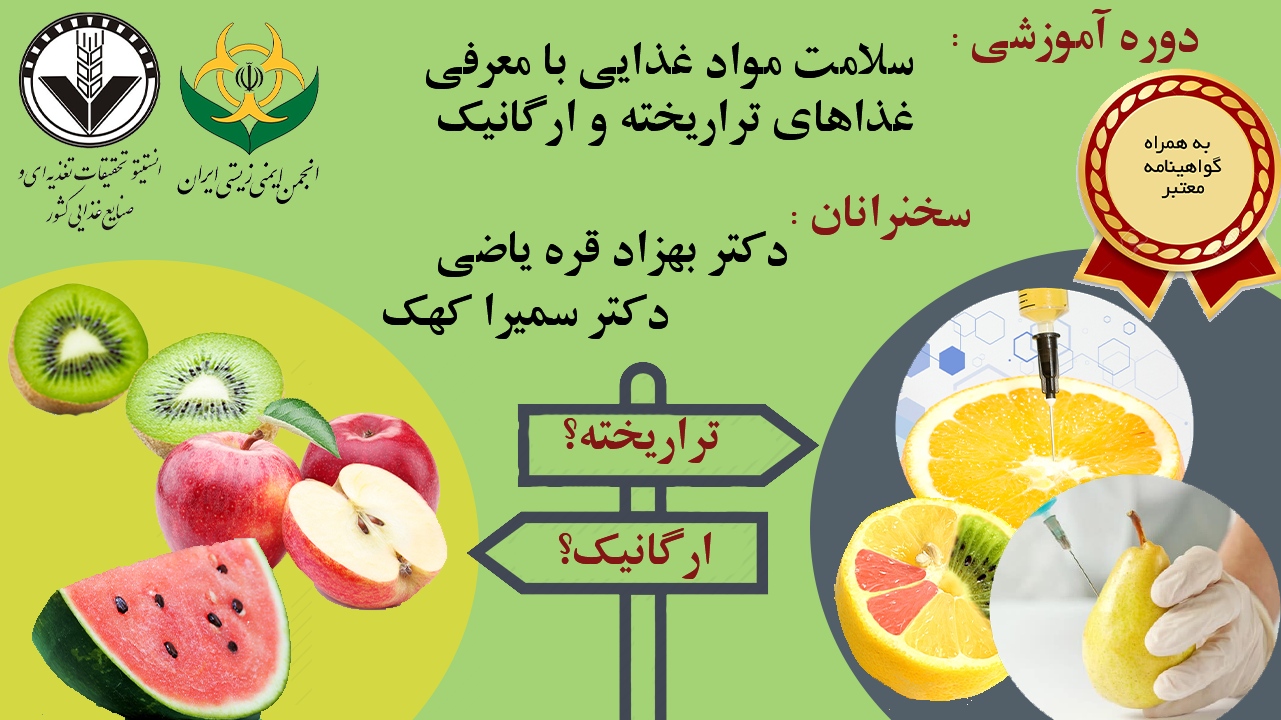
<style>
.page{position:relative;width:1281px;height:720px;background:#a3d375}
.page>*{position:absolute;margin:0}
.t1{font:48px "Titr";color:#831515}
.t2{font:48px/8.3px "Titr";color:#000000}
.t3{font:48px "Titr";color:#000000}
</style>
<div class="page">
<p class="t1" style="left:953px;top:9px;width:245px;height:54px">: دوره آموزشی</p>
<p class="t2" style="left:426px;top:42px;width:487px;height:104px;text-align:center">سلامت مواد غذایی با معرفی<br><br><br><br><br><br><br> غذاهای تراریخته و ارگانیک</p>
<p class="t1" style="left:792px;top:194px;width:178px;height:46px">: سخنرانان</p>
<p class="t3" style="left:438px;top:230px;width:349px;height:47px">دکتر بهزاد قره یاضی</p>
<p class="t3" style="left:383px;top:293px;width:285px;height:46px">دکتر سمیرا کهک</p>
<p class="t1" style="left:564px;top:417px;width:156px;height:47px">تراریخته؟</p>
<p class="t1" style="left:559px;top:528px;width:152px;height:51px">ارگانیک؟</p>
</div>
